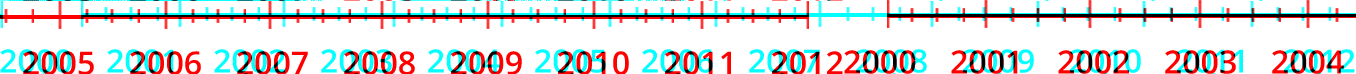
<style>
.page{position:relative;width:1356px;height:74px;background:#ffffff}
.page>*{position:absolute;margin:0}
.t1{font:32px "OpenSans-Semibold"}
</style>
<div class="page">
<p class="t1" style="left:0px;top:50px;width:1355px;height:24px">2000    2001    2002    2003    2004    2005    2006    2007    2008    2009    2010    2011    2012</p>
</div>
